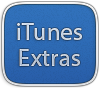
<style>
.page{position:relative;width:100px;height:88px}
.page>*{position:absolute;margin:0}
.t1{font:24px/26px "MyriadPro-Regular";letter-spacing:0.02em;color:#c8d5e5}
</style>
<div class="page">
<p class="t1" style="left:17px;top:23px;width:65px;height:43px;text-align:center">iTunes<br>Extras</p>
</div>
